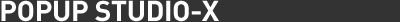
<style>
.page{position:relative;width:400px;height:22px;background:#333333}
.page>*{position:absolute;margin:0}
.t1{font:28.2px "DIN-Bold";letter-spacing:-0.02em;color:#ffffff}
</style>
<div class="page">
<p class="t1" style="left:1px;top:0px;width:218px;height:22px">POPUP STUDIO-X</p>
</div>
